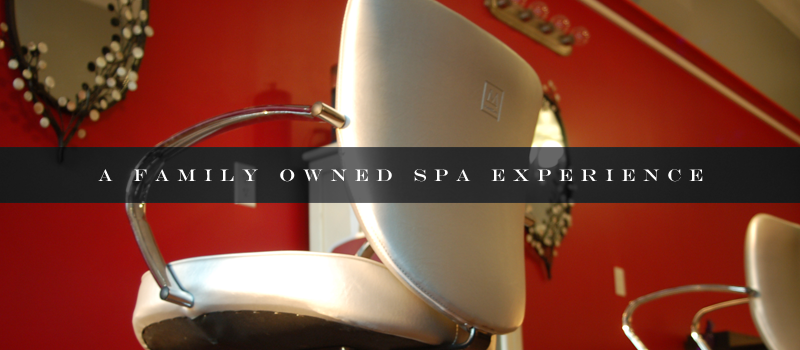
<style>
.page{position:relative;width:800px;height:350px}
.page>*{position:absolute;margin:0}
.t1{font:17px "EngraversMT";letter-spacing:0.44em;color:#fffefe}
</style>
<div class="page">
<p class="t1" style="left:98px;top:169px;width:605px;height:13px">A family owned spa experience</p>
</div>
